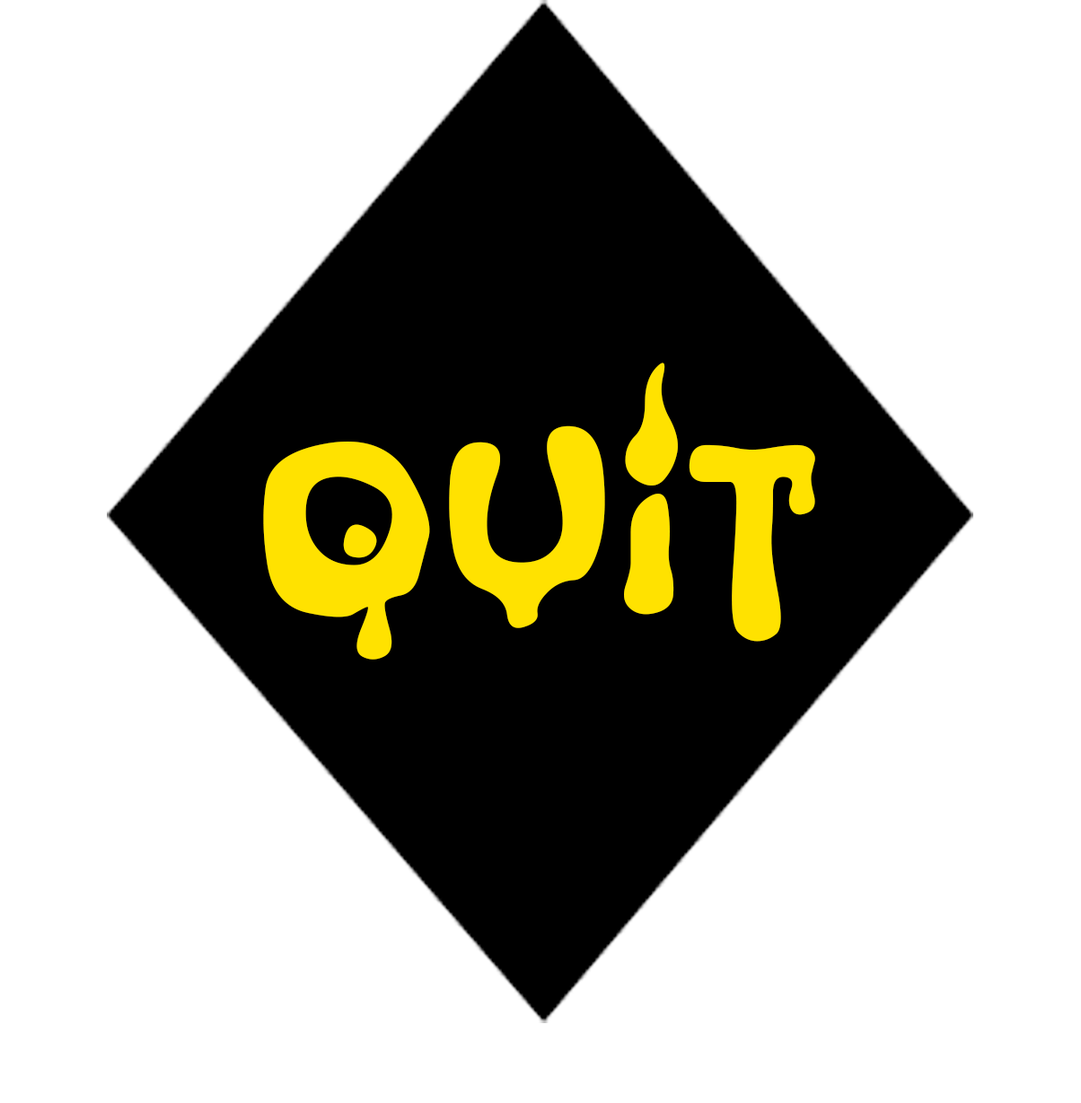
<style>
.page{position:relative;width:1081px;height:1103px;background:#ffffff}
.page>*{position:absolute;margin:0}
.t1{font:269.3px "SpookyLight";color:#ffe200}
</style>
<div class="page">
<p class="t1" style="left:263px;top:363px;width:552px;height:297px">quit</p>
</div>
